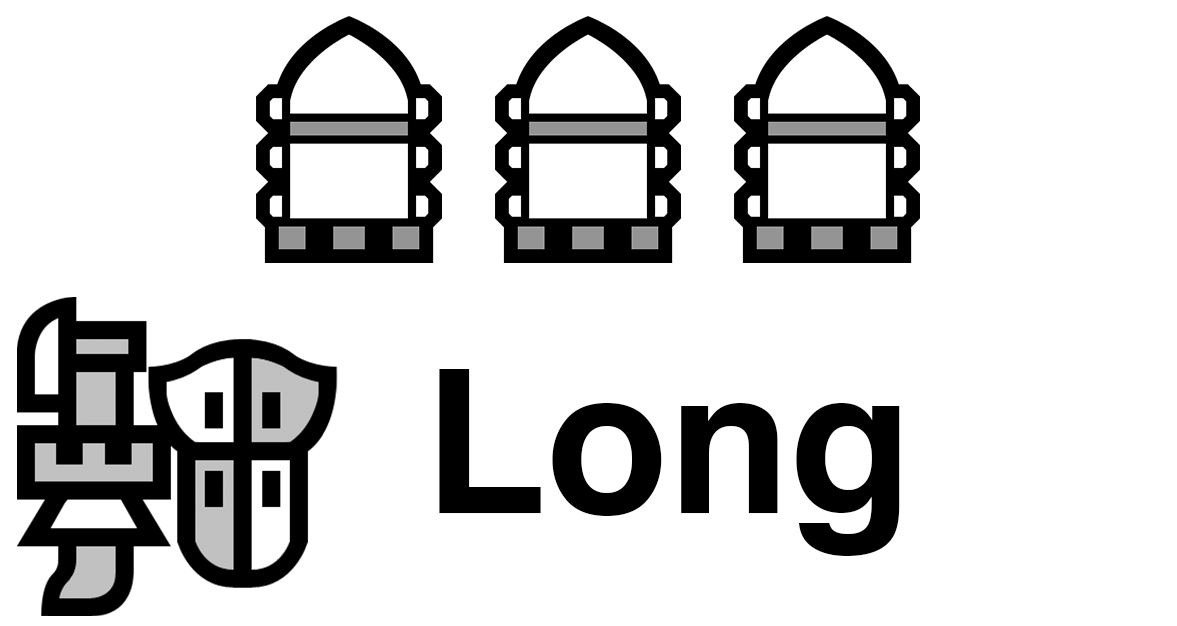
<style>
.page{position:relative;width:1177px;height:626px;background:#ffffff}
.page>*{position:absolute;margin:0}
.t1{font:200px "Helvetica-Bold";color:#000000}
</style>
<div class="page">
<p class="t1" style="left:439px;top:369px;width:461px;height:187px">Long</p>
</div>
